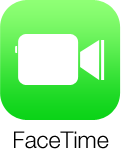
<style>
.page{position:relative;width:121px;height:149px;background:#ffffff}
.page>*{position:absolute;margin:0}
.t1{font:23px "HelveticaNeue-Light";color:#000000}
</style>
<div class="page">
<p class="t1" style="left:14px;top:131px;width:95px;height:18px">FaceTime</p>
</div>
